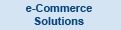
<style>
.page{position:relative;width:121px;height:30px;background:#d5e4f2}
.page>*{position:absolute;margin:0}
.t1{font:11px "Arial-BoldMT";color:#064787}
</style>
<div class="page">
<p class="t1" style="left:26px;top:4px;width:66px;height:21px;text-align:center">e-Commerce<br>Solutions</p>
</div>
